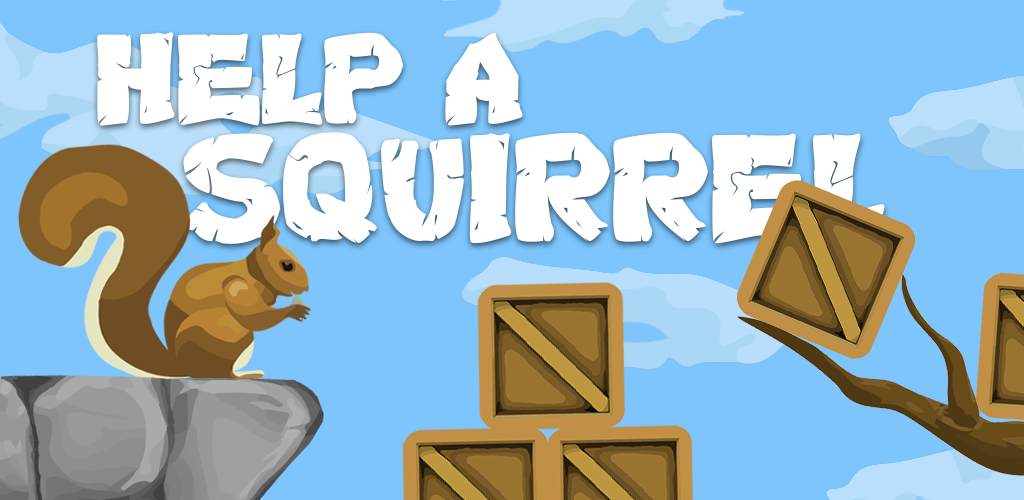
<style>
.page{position:relative;width:1024px;height:500px;background:#7dc5fc}
.page>*{position:absolute;margin:0}
.t1{font:125px "Turtles";color:#ffffff}
.t2{font:150px "Turtles";color:#ffffff}
</style>
<div class="page">
<p class="t1" style="left:97px;top:32px;width:307px;height:94px">HELP</p>
<p class="t1" style="left:445px;top:32px;width:78px;height:94px">A</p>
<p class="t2" style="left:183px;top:132px;width:703px;height:112px">SQUIRREL</p>
</div>
